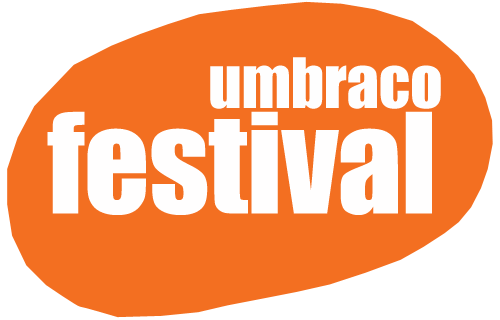
<style>
.page{position:relative;width:500px;height:320px;background:#f36f21}
.page>*{position:absolute;margin:0}
.t1{font:64.3px "Impact";letter-spacing:-0.005em;color:#fefefe}
.t2{font:128.5px "Impact";letter-spacing:-0.005em;color:#fffefe}
</style>
<div class="page">
<p class="t1" style="left:210px;top:57px;width:231px;height:52px">umbraco</p>
<p class="t2" style="left:47px;top:111px;width:385px;height:104px">festival</p>
</div>
